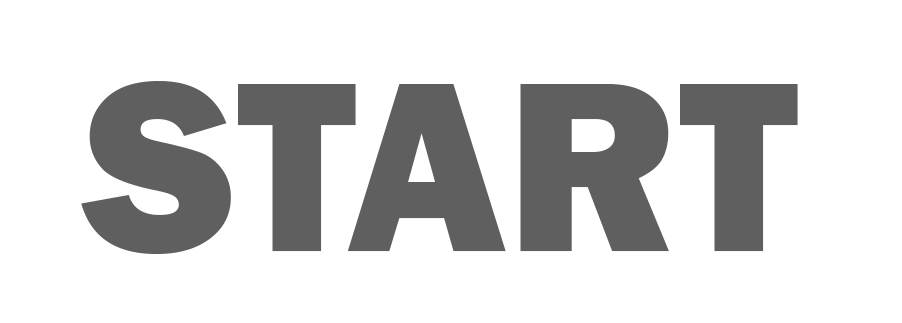
<style>
.page{position:relative;width:902px;height:323px;background:#ffffff}
.page>*{position:absolute;margin:0}
.t1{font:250px "FranklinGothic-Heavy";color:#5f5f5f}
</style>
<div class="page">
<p class="t1" style="left:81px;top:81px;width:717px;height:173px">START</p>
</div>
